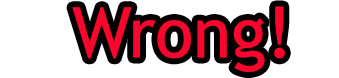
<style>
.page{position:relative;width:339px;height:78px;background:#ffffff}
.page>*{position:absolute;margin:0}
.t1{font:70px "TrebuchetMS";color:#f8062e}
</style>
<div class="page">
<p class="t1" style="left:72px;top:6px;width:213px;height:66px">Wrong!</p>
</div>
